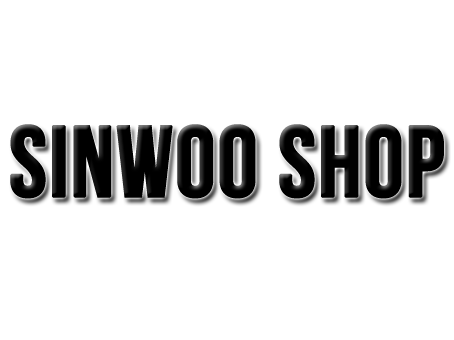
<style>
.page{position:relative;width:454px;height:340px;background:#ffffff}
.page>*{position:absolute;margin:0}
.t1{font:100px "BebasNeue";color:#000000;font-weight:bold}
</style>
<div class="page">
<p class="t1" style="left:10px;top:124px;width:434px;height:75px">sinwoo shop</p>
</div>
